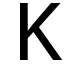
<style>
.page{position:relative;width:75px;height:75px;background:#ffffff}
.page>*{position:absolute;margin:0}
.t1{font:84.2px "MyriadPro-Regular";color:#000000;scale:1.05 1}
</style>
<div class="page">
<p class="t1" style="left:20px;top:3px;width:43px;height:57px">K</p>
</div>
